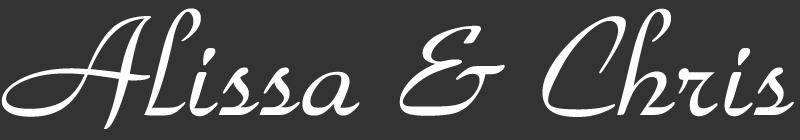
<style>
.page{position:relative;width:800px;height:140px;background:#333333}
.page>*{position:absolute;margin:0}
.t1{font:149.2px "ParkAvenueBT-Regular";color:#fefefe}
</style>
<div class="page">
<p class="t1" style="left:1px;top:8px;width:793px;height:121px">Alissa &amp; Chris</p>
</div>
